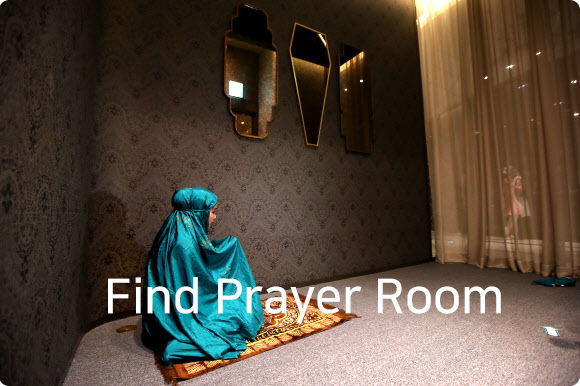
<style>
.page{position:relative;width:580px;height:386px}
.page>*{position:absolute;margin:0}
.t1{font:48px "NanumSquareB";color:#ffffff}
</style>
<div class="page">
<p class="t1" style="left:108px;top:277px;width:393px;height:47px">Find Prayer Room</p>
</div>
